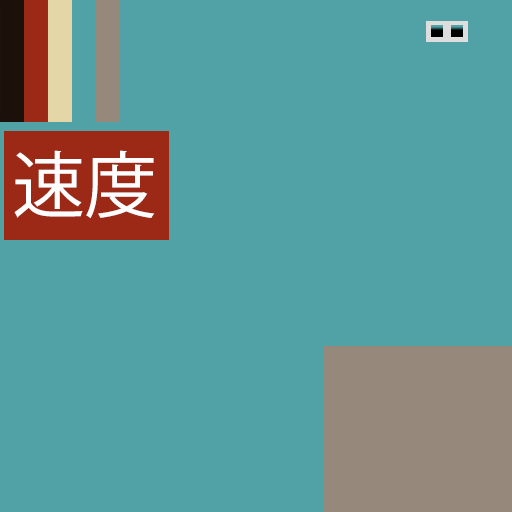
<style>
.page{position:relative;width:512px;height:512px;background:#50a2a7}
.page>*{position:absolute;margin:0}
.t1{font:72px "KozGoPr6N-Regular";color:#fefefe}
</style>
<div class="page">
<p class="t1" style="left:14px;top:150px;width:141px;height:69px">速度</p>
</div>
